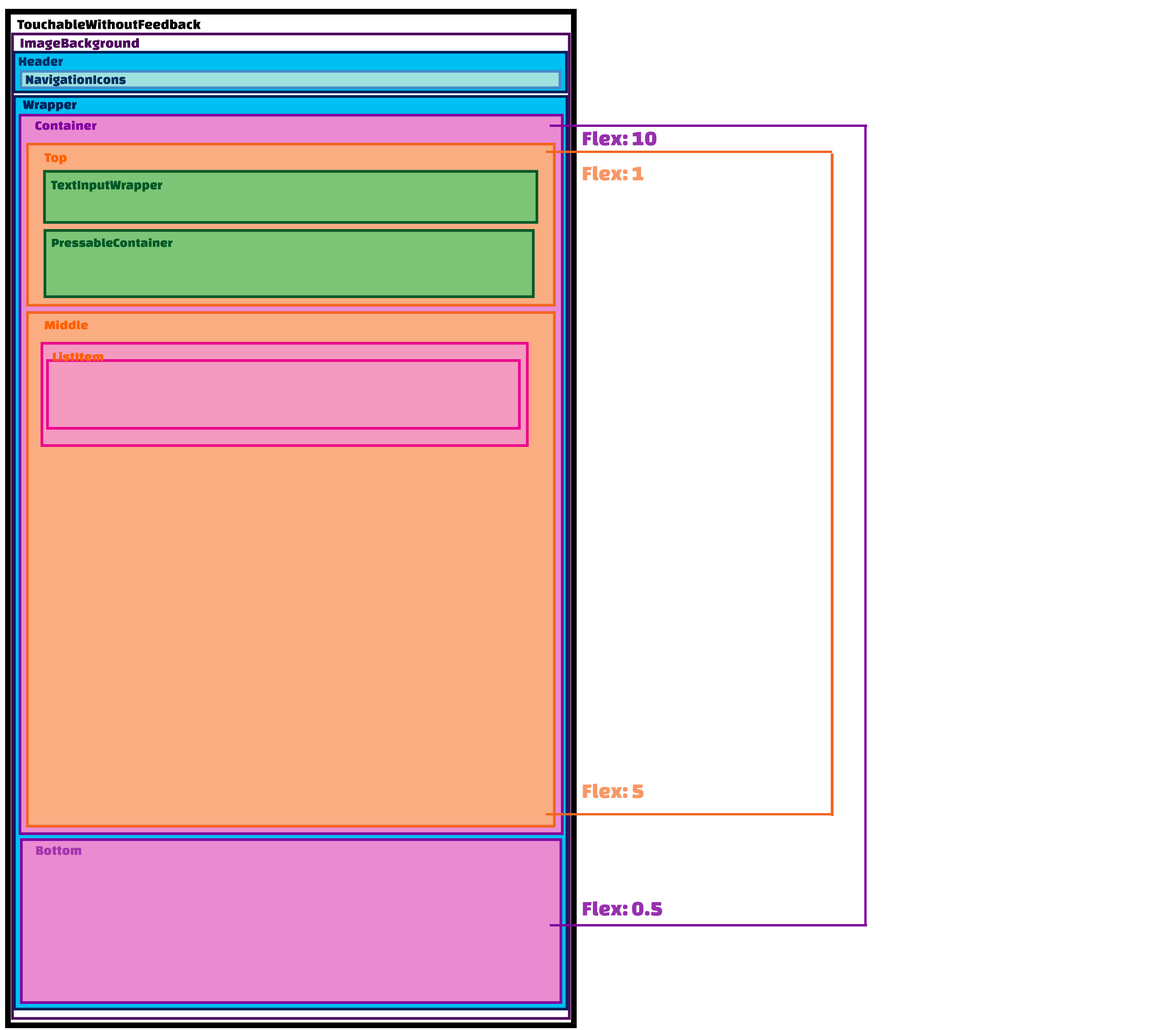
<style>
.page{position:relative;width:1158px;height:1030px;background:#ffffff}
.page>*{position:absolute;margin:0}
.t1{font:14.5px "ChangaOne";color:#000000}
.t2{font:14.5px "ChangaOne";color:#4e045e}
.t3{font:13.9px "ChangaOne";color:#002f64}
.t4{font:13.9px "ChangaOne";color:#002157}
.t5{font:13.3px "ChangaOne";color:#82039e;scale:1.04 1}
.t6{font:21.5px "ChangaOne";color:#9830af}
.t7{font:13.9px "ChangaOne";color:#ff6000}
.t8{font:21.5px "ChangaOne";color:#f79865}
.t9{font:13.9px "ChangaOne";color:#005826}
.t10{font:12.8px "ChangaOne";color:#005826;scale:1.05 1}
.t11{font:13px "ChangaOne";color:#ff6000;scale:1.07 1}
.t12{font:13.9px "ChangaOne";color:#a434ae}
</style>
<div class="page">
<p class="t1" style="left:17px;top:19px;width:184px;height:10px">TouchableWithoutFeedback</p>
<p class="t2" style="left:21px;top:38px;width:118px;height:12px">ImageBackground</p>
<p class="t3" style="left:19px;top:56px;width:44px;height:10px">Header</p>
<p class="t3" style="left:26px;top:75px;width:100px;height:11px">NavigationIcons</p>
<p class="t4" style="left:23px;top:100px;width:54px;height:11px">Wrapper</p>
<p class="t5" style="left:35px;top:121px;width:62px;height:9px">Container</p>
<p class="t6" style="left:583px;top:131px;width:74px;height:15px">Flex: 10</p>
<p class="t7" style="left:44px;top:153px;width:23px;height:12px">Top</p>
<p class="t8" style="left:583px;top:166px;width:61px;height:15px">Flex: 1</p>
<p class="t9" style="left:51px;top:180px;width:111px;height:12px">TextInputWrapper</p>
<p class="t10" style="left:52px;top:238px;width:121px;height:9px">PressableContainer</p>
<p class="t11" style="left:44px;top:320px;width:44px;height:10px">Middle</p>
<p class="t11" style="left:53px;top:352px;width:51px;height:9px">ListItem</p>
<p class="t11" style="left:53px;top:352px;width:51px;height:9px">ListItem</p>
<p class="t8" style="left:583px;top:783px;width:61px;height:15px">Flex: 5</p>
<p class="t12" style="left:36px;top:845px;width:46px;height:10px">Bottom</p>
<p class="t6" style="left:583px;top:901px;width:80px;height:15px">Flex: 0.5</p>
</div>
